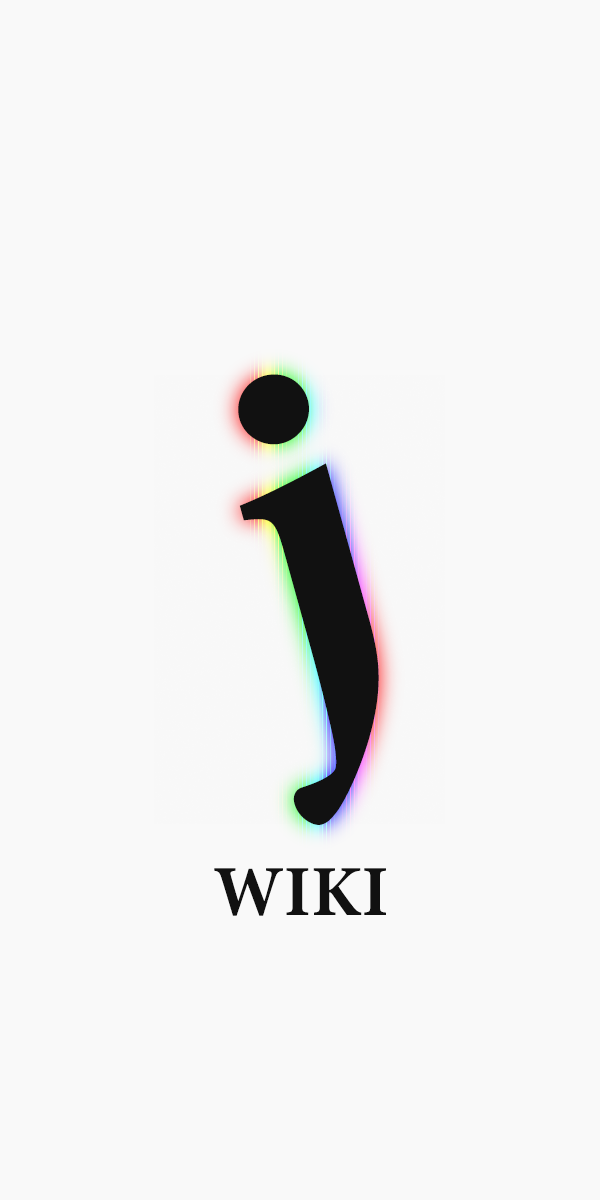
<style>
.page{position:relative;width:600px;height:1200px;background:#f9f9f9}
.page>*{position:absolute;margin:0}
.t1{font:496.8px "MinionPro-Bold";color:#111111}
.t2{font:72px "MinionPro-Bold";color:#111111}
</style>
<div class="page">
<p class="t1" style="left:238px;top:374px;width:141px;height:451px;rotate:-15deg">j</p>
<p class="t2" style="left:214px;top:868px;width:172px;height:48px">WIKI</p>
</div>
